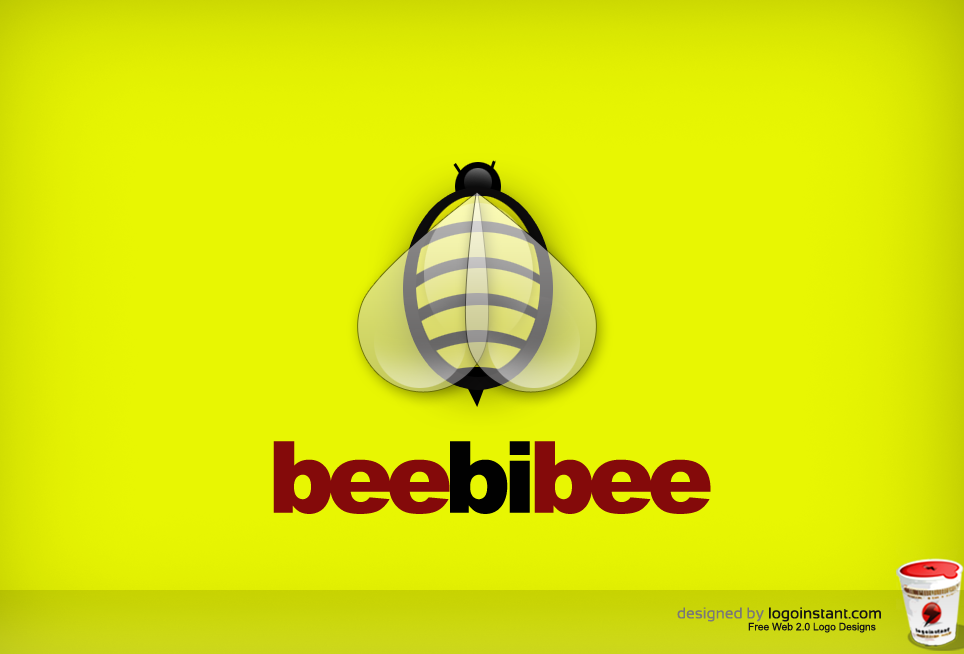
<style>
.page{position:relative;width:964px;height:654px;background:#e8f602}
.page>*{position:absolute;margin:0}
.t1{font:99.7px "Arial-Black";letter-spacing:-0.075em;color:#840a0a}
.t2{font:99.7px "Arial-Black";letter-spacing:-0.075em;color:#010101}
.t3{font:15.7px "Sansation-Regular";color:#0e0d0d}
.t4{font:15.7px "Sansation-Regular";color:#7f7d7d}
.t5{font:10.3px "ArialMT";color:#060606}
</style>
<div class="page">
<p class="t1" style="left:273px;top:441px;width:438px;height:73px">bee<span class="t2">bi</span>bee</p>
<p class="t3" style="left:677px;top:607px;width:204px;height:15px"><span class="t4">designed by </span>logoinstant.com</p>
<p class="t5" style="left:748px;top:622px;width:128px;height:11px">Free Web 2.0 Logo Designs</p>
</div>
